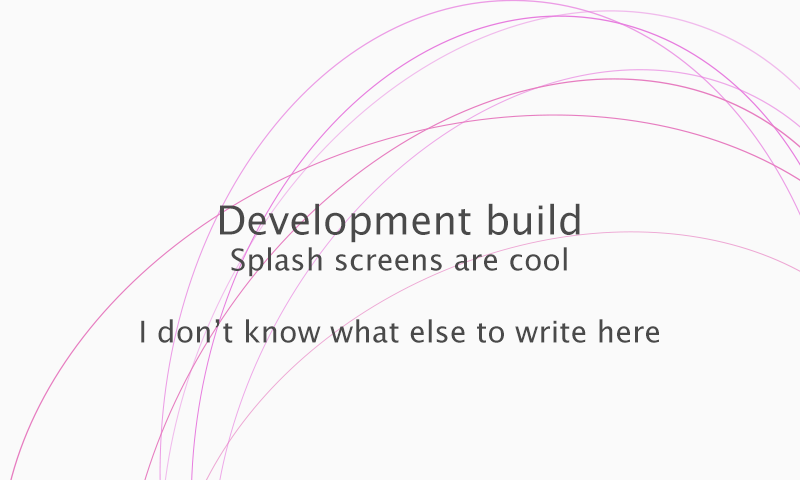
<style>
.page{position:relative;width:800px;height:480px;background:#fafafa}
.page>*{position:absolute;margin:0}
.t1{font:30px "LucidaGrande";color:#4a4a4a}
.t2{font:40px "LucidaGrande";color:#4a4a4a}
</style>
<div class="page">
<p class="t1" style="left:141px;top:203px;width:518px;height:140px;text-align:center"><span class="t2">Development build<br></span>Splash screens are cool<br><br>I don’t know what else to write here</p>
</div>
